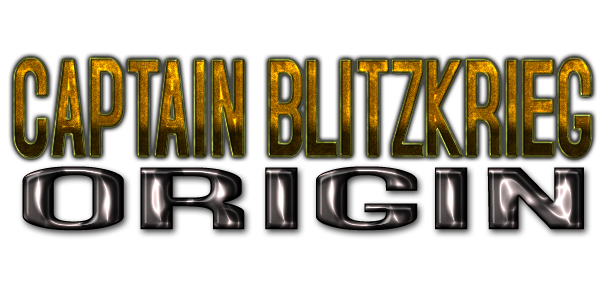
<style>
.page{position:relative;width:604px;height:302px;background:#ffffff}
.page>*{position:absolute;margin:0}
.t1{font:147.6px "AccidentalPresidency";scale:0.68 1}
.t2{font:94.3px "AccidentalPresidency";scale:3.28 1}
</style>
<div class="page">
<p class="t1" style="left:14px;top:58px;width:578px;height:100px">CAPTAIN BLITZKRIEG</p>
<p class="t2" style="left:22px;top:166px;width:562px;height:65px">ORIGIN</p>
</div>
